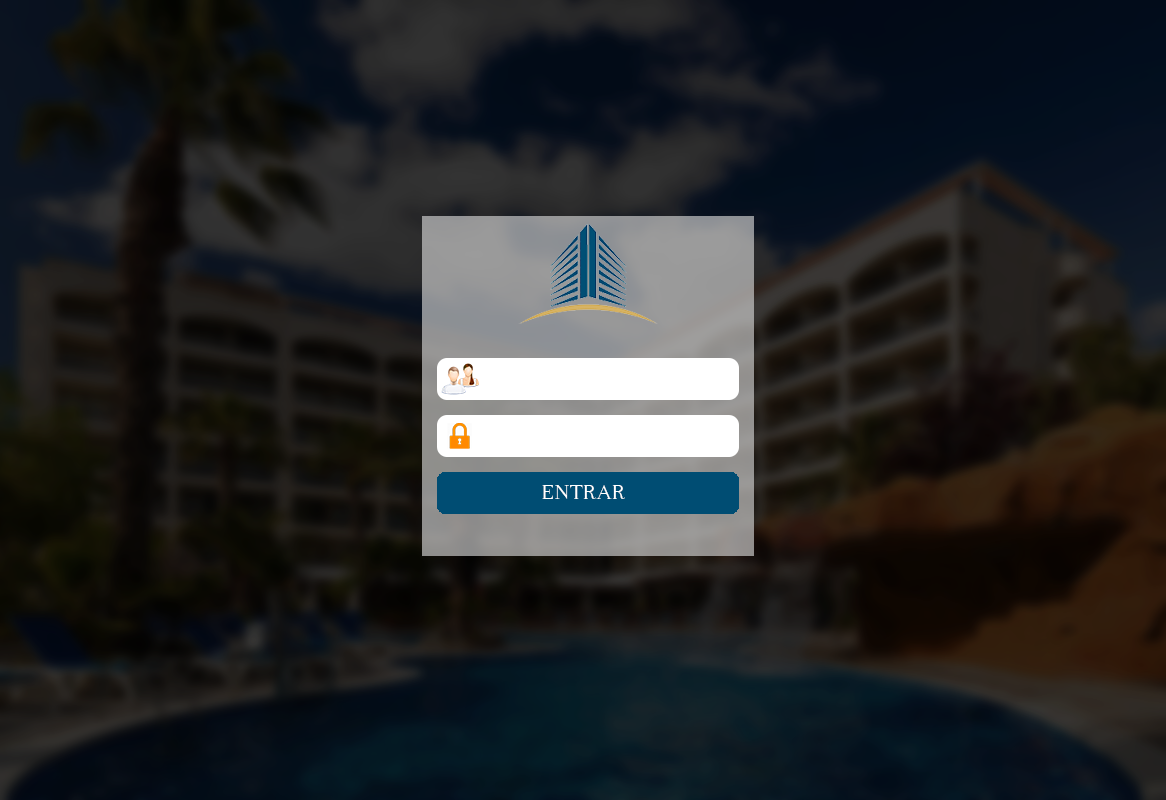
<style>
.page{position:relative;width:1166px;height:800px}
.page>*{position:absolute;margin:0}
.t1{font:20.8px "EuroRoman";color:#ffffff}
</style>
<div class="page">
<p class="t1" style="left:542px;top:485px;width:83px;height:14px">ENTRAR</p>
</div>
